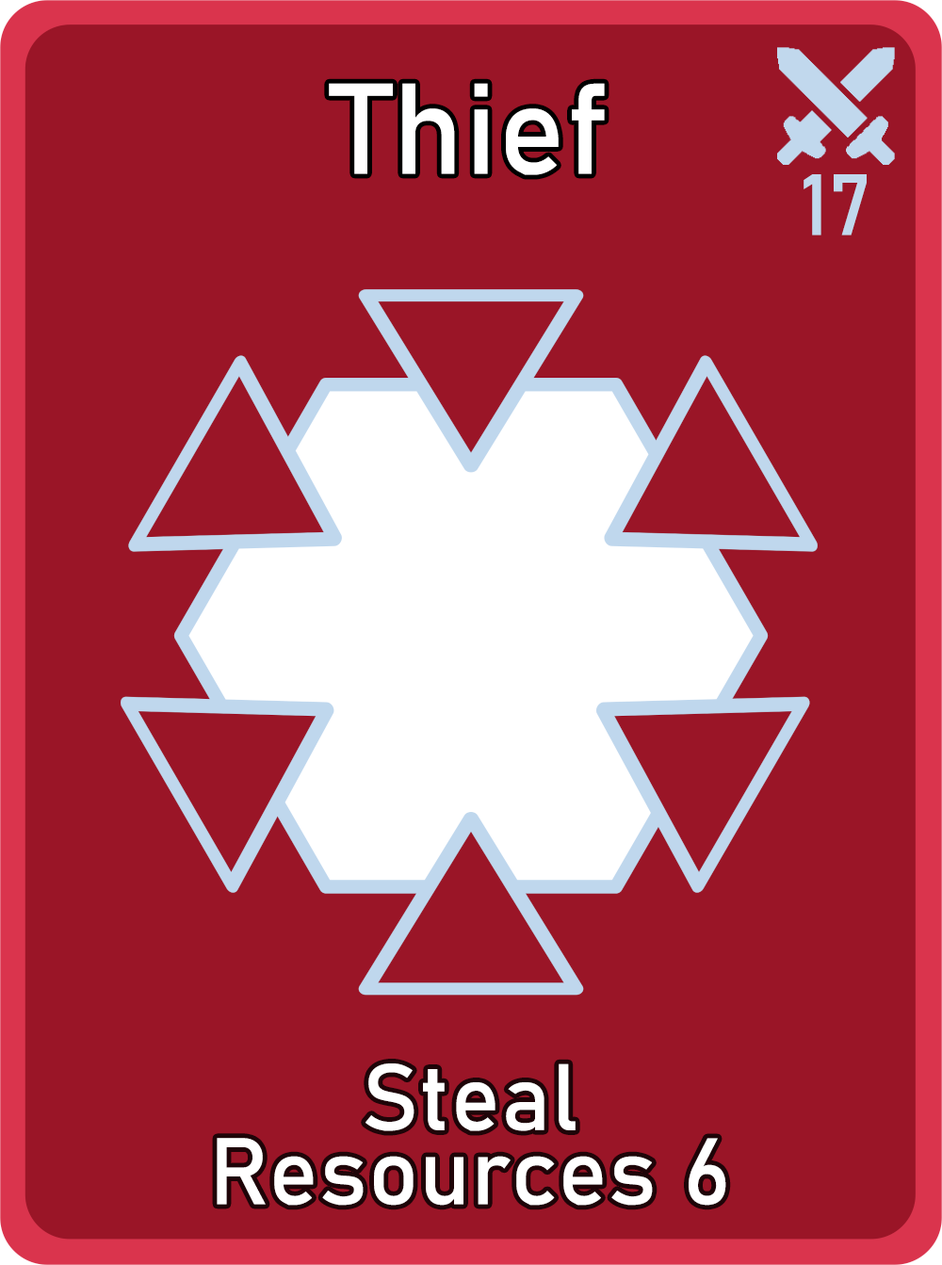
<style>
.page{position:relative;width:942px;height:1265px;background:#9a1527}
.page>*{position:absolute;margin:0}
.t1{font:126.7px "Bahnschrift";letter-spacing:0.01em;color:#ffffff}
.t2{font:85px "Bahnschrift";letter-spacing:0.01em;color:#c1d8ed}
.t3{font:92.7px/74.2px "Bahnschrift";letter-spacing:0.01em;color:#ffffff}
</style>
<div class="page">
<p class="t1" style="left:329px;top:83px;width:276px;height:92px">Thief</p>
<p class="t2" style="left:804px;top:174px;width:63px;height:62px">17</p>
<p class="t3" style="left:217px;top:1064px;width:509px;height:142px;text-align:center">Steal<br>Resources 6</p>
</div>
